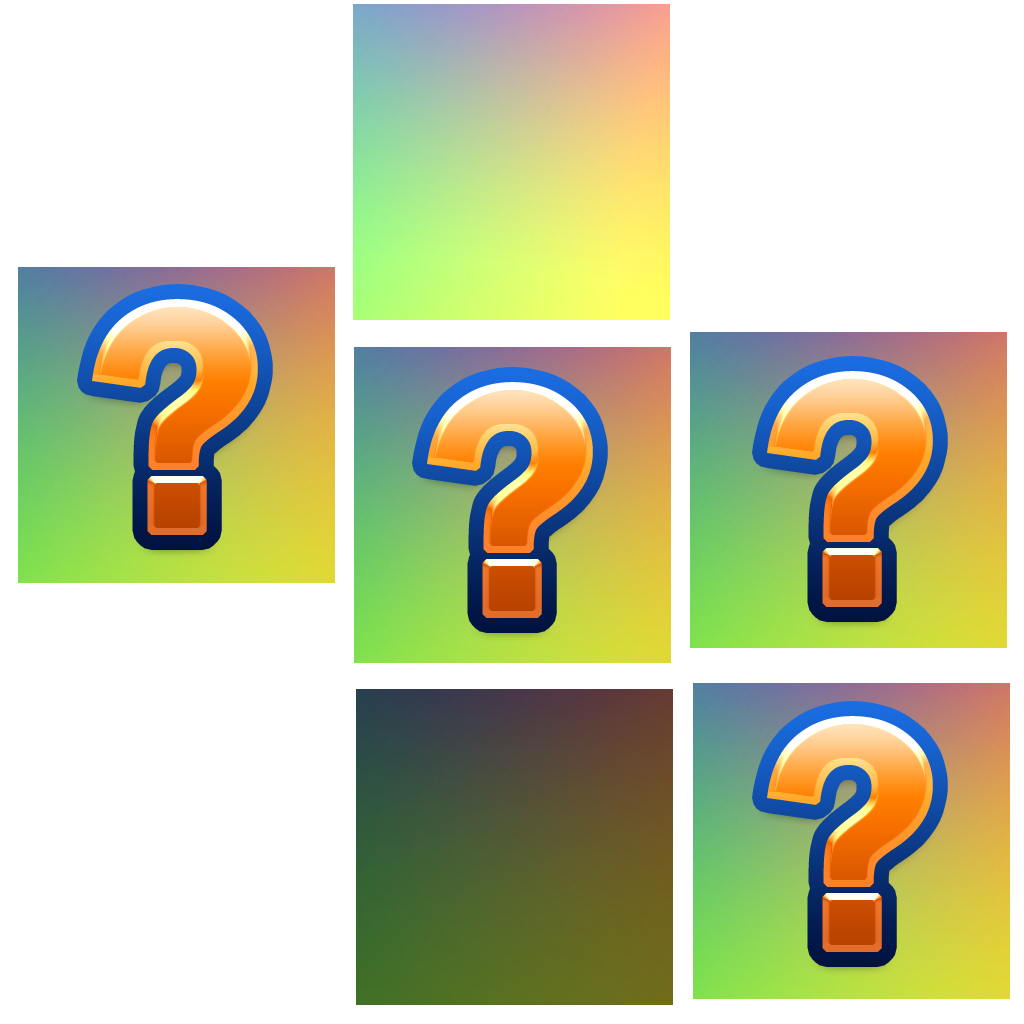
<style>
.page{position:relative;width:1024px;height:1024px;background:#ffffff}
.page>*{position:absolute;margin:0}
.t1{font:336px "FranklinGothic-Demi";font-weight:bold}
</style>
<div class="page">
<p class="t1" style="left:92px;top:299px;width:166px;height:236px">?</p>
<p class="t1" style="left:767px;top:371px;width:166px;height:236px">?</p>
<p class="t1" style="left:427px;top:382px;width:166px;height:236px">?</p>
<p class="t1" style="left:767px;top:716px;width:166px;height:236px">?</p>
</div>
